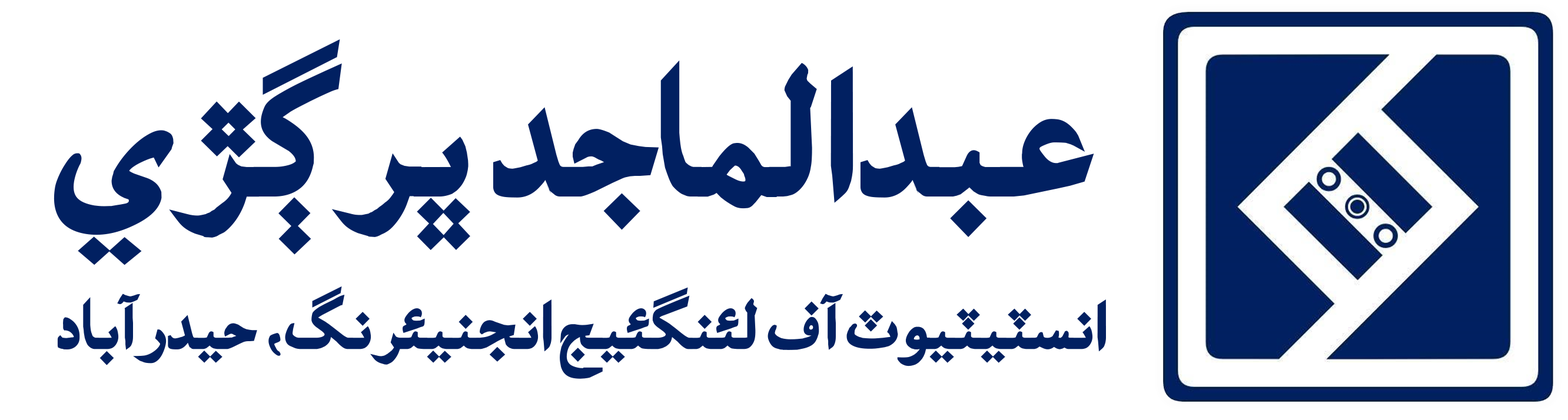
<style>
.page{position:relative;width:1568px;height:420px;background:#ffffff}
.page>*{position:absolute;margin:0}
.t1{font:182.5px "AS-Lateefi-M";color:#012061}
.t2{font:69.5px "AS-Lateefi-M";color:#012061}
</style>
<div class="page">
<p class="t1" style="left:54px;top:39px;width:1040px;height:226px">عبدالماجد ڀرڳڙي</p>
<p class="t2" style="left:57px;top:286px;width:1049px;height:93px">انسٽيٽيوٽ آف لئنگئيج انجنيئرنگ، حيدرآباد</p>
</div>
